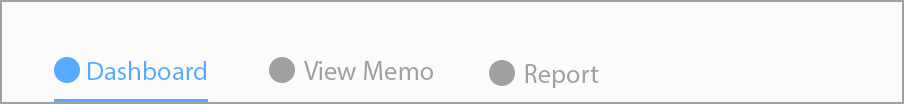
<style>
.page{position:relative;width:904px;height:104px;background:#fbfbfb}
.page>*{position:absolute;margin:0}
.t1{font:26.7px "MyriadPro-Regular";color:#57aaff}
.t2{font:27.1px "MyriadPro-Regular";color:#a0a0a0}
</style>
<div class="page">
<p class="t1" style="left:88px;top:61px;width:118px;height:19px">Dashboard</p>
<p class="t2" style="left:304px;top:61px;width:129px;height:19px">View Memo</p>
<p class="t2" style="left:525px;top:64px;width:74px;height:24px">Report</p>
</div>
